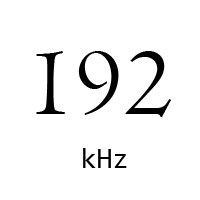
<style>
.page{position:relative;width:200px;height:200px;background:#ffffff}
.page>*{position:absolute;margin:0}
.t1{font:100px "Centaur";color:#000000}
.t2{font:29.2px "Consolas";color:#000000}
</style>
<div class="page">
<p class="t1" style="left:36px;top:51px;width:135px;height:66px">192</p>
<p class="t2" style="left:83px;top:148px;width:44px;height:20px">kHz</p>
</div>
